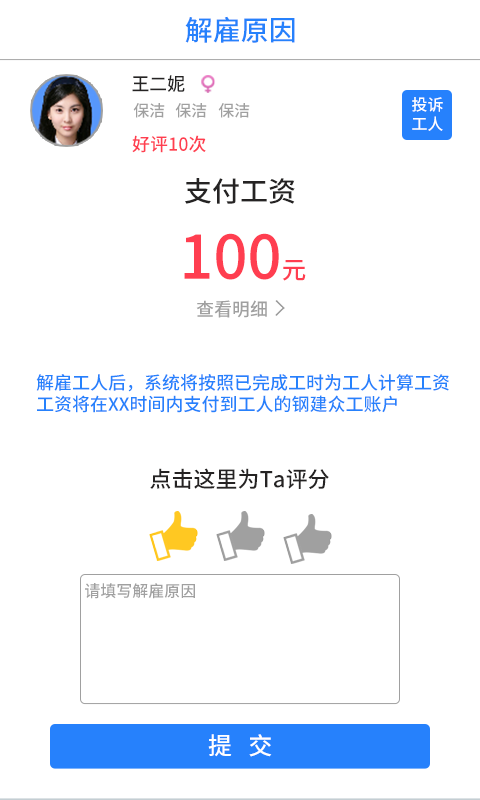
<style>
.page{position:relative;width:480px;height:800px;background:#ffffff}
.page>*{position:absolute;margin:0}
.t1{font:28px "NotoSansHans-Medium";color:#2681fc}
.t2{font:18.3px "NotoSansHans-Medium";color:#252323}
.t3{font:16px "NotoSansHans-Medium";color:#ffffff}
.t4{font:16px "NotoSansHans-Medium";color:#a0a0a0}
.t5{font:18px "NotoSansHans-Medium";color:#ff3e50}
.t6{font:28px "NotoSansHans-Medium";color:#252323}
.t7{font:60px "NotoSansHans-Medium";color:#ff3e50}
.t8{font:24.5px "NotoSansHans-Medium";color:#ff3e50}
.t9{font:18px "NotoSansHans-Medium";color:#2681fc}
.t10{font:22px "NotoSansHans-Medium";color:#252323}
.t11{font:24px "NotoSansHans-Medium";color:#ffffff}
</style>
<div class="page">
<p class="t1" style="left:185px;top:16px;width:110px;height:27px">解雇原因</p>
<p class="t2" style="left:132px;top:75px;width:53px;height:17px">王二妮</p>
<p class="t3" style="left:412px;top:97px;width:31px;height:34px">投诉<br>工人</p>
<p class="t4" style="left:133px;top:103px;width:32px;height:15px">保洁</p>
<p class="t4" style="left:175px;top:103px;width:32px;height:15px">保洁</p>
<p class="t4" style="left:218px;top:103px;width:32px;height:15px">保洁</p>
<p class="t5" style="left:132px;top:135px;width:74px;height:18px">好评10次</p>
<p class="t6" style="left:185px;top:178px;width:110px;height:26px">支付工资</p>
<p class="t7" style="left:184px;top:233px;width:122px;height:48px">100<span class="t8">元</span></p>
<p class="t9" style="left:36px;top:374px;width:413px;height:39px">解雇工人后，系统将按照已完成工时为工人计算工资<br>工资将在XX时间内支付到工人的钢建众工账户</p>
<p class="t10" style="left:150px;top:468px;width:179px;height:21px">点击这里为Ta评分</p>
<p class="t4" style="left:85px;top:583px;width:110px;height:16px">请填写解雇原因</p>
<p class="t11" style="left:208px;top:734px;width:64px;height:23px">提   交</p>
</div>
